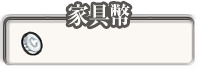
<style>
.page{position:relative;width:198px;height:69px;background:#fbf8f3}
.page>*{position:absolute;margin:0}
.t1{font:24px "RyuminPr6N-ExBold";color:#fbfbf9;scale:0.9 1}
</style>
<div class="page">
<p class="t1" style="left:68px;top:3px;width:62px;height:24px">家具幣</p>
</div>
